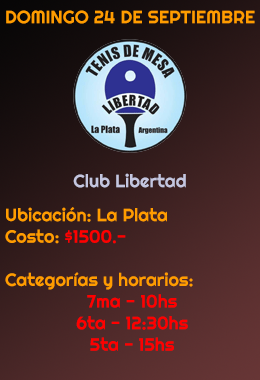
<style>
.page{position:relative;width:260px;height:380px}
.page>*{position:absolute;margin:0}
.t1{font:18px "Righteous-Regular";color:#ff9c00}
.t2{font:18px "Righteous-Regular";color:#c4c6df}
.t3{font:18px "Righteous-Regular";color:#ff0000}
</style>
<div class="page">
<p class="t1" style="left:6px;top:10px;width:249px;height:14px">DOMINGO 24 DE SEPTIEMBRE</p>
<p class="t2" style="left:73px;top:173px;width:113px;height:15px">Club Libertad</p>
<p class="t3" style="left:5px;top:207px;width:188px;height:144px"><span class="t1"> Ubicación: La Plata<br> Costo: </span>$1500.-<br><br><span class="t1"> Categorías y horarios:<br></span>7ma - 10hs<br>6ta - 12:30hs<br>5ta - 15hs</p>
</div>
